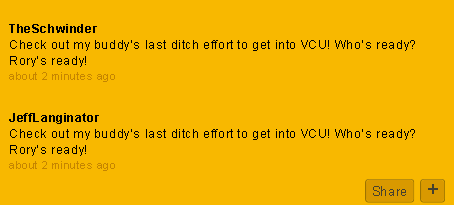
<style>
.page{position:relative;width:454px;height:205px;background:#f8b800}
.page>*{position:absolute;margin:0}
.t1{font:12px/16px "ArialMT";letter-spacing:0.05em;color:#000000}
.t2{font:12px/16px "Arial-BoldMT";letter-spacing:0.05em;color:#000000}
.t3{font:11px/15px "ArialMT";letter-spacing:0.05em;color:#c58500}
.t4{font:12px/12px "Arial-BoldMT";letter-spacing:0.05em;color:#000000}
</style>
<div class="page">
<p class="t1" style="left:9px;top:24px;width:406px;height:147px"><span class="t2">TheSchwinder<br></span>Check out my buddy’s last ditch effort to get into VCU! Who’s ready? Rory’s ready!<br><span class="t3">about 2 minutes ago<br><br><br></span><span class="t4">JeffLanginator<br></span>Check out my buddy’s last ditch effort to get into VCU! Who’s ready? Rory’s ready!<br><span class="t3">about 2 minutes ago</span></p>
</div>
